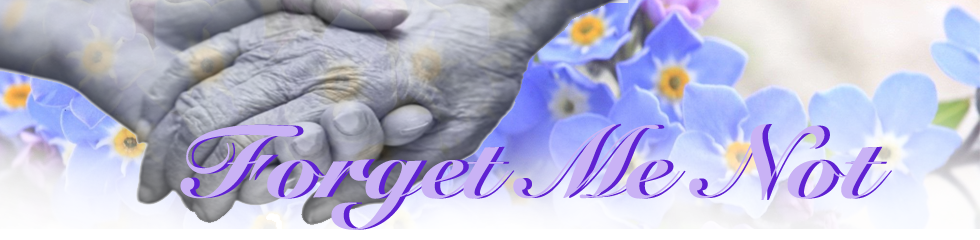
<style>
.page{position:relative;width:980px;height:240px}
.page>*{position:absolute;margin:0}
.t1{font:100px "SnellRoundhand-Black"}
</style>
<div class="page">
<p class="t1" style="left:186px;top:123px;width:706px;height:107px">Forget Me Not</p>
</div>
